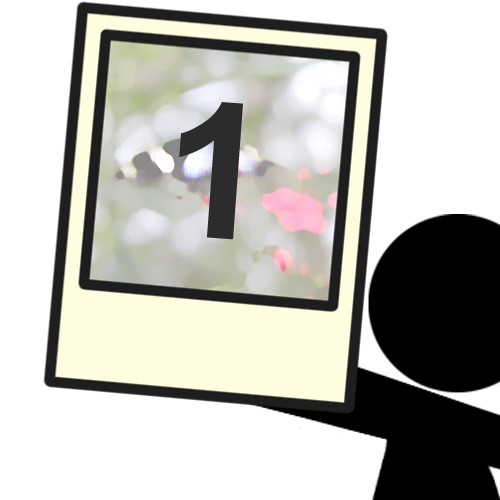
<style>
.page{position:relative;width:500px;height:500px;background:#ffffff}
.page>*{position:absolute;margin:0}
.t1{font:189px "Arial-BoldMT";color:#2c2c2c}
</style>
<div class="page">
<p class="t1" style="left:179px;top:102px;width:64px;height:138px;rotate:4deg">1</p>
</div>
